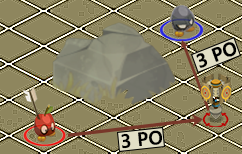
<style>
.page{position:relative;width:242px;height:154px;background:#8e865e}
.page>*{position:absolute;margin:0}
.t1{font:18.8px "SegoeUI-Semibold";color:#000000;font-weight:bold}
.t2{font:19.1px "SegoeUI-Semibold";color:#000000;font-weight:bold}
</style>
<div class="page">
<p class="t1" style="left:196px;top:42px;width:41px;height:26px;rotate:-22deg">3 PO</p>
<p class="t2" style="left:121px;top:130px;width:42px;height:19px;rotate:-6deg">3 PO</p>
</div>
